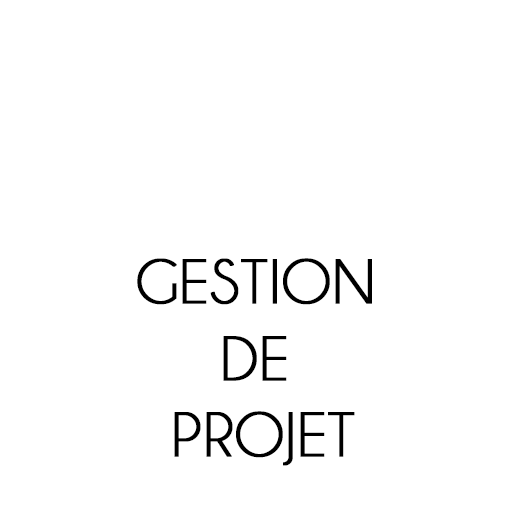
<style>
.page{position:relative;width:512px;height:512px;background:#ffffff}
.page>*{position:absolute;margin:0}
.t1{font:63.8px "Champagne&Limousines";color:#000000;text-transform:uppercase;font-weight:bold}
</style>
<div class="page">
<p class="t1" style="left:137px;top:258px;width:235px;height:208px;text-align:center">GESTION <br>DE <br>projet</p>
</div>
